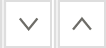
<style>
.page{position:relative;width:106px;height:48px;background:#ffffff}
.page>*{position:absolute;margin:0}
.t1{font:32px "DidactGothic";color:#6d6c67;scale:1.03 1}
.t2{font:32.5px "DidactGothic";color:#6d6c67}
</style>
<div class="page">
<p class="t1" style="left:19px;top:17px;width:20px;height:14px;rotate:90deg">&gt;</p>
<p class="t2" style="left:72px;top:16px;width:20px;height:15px;rotate:-90deg">&gt;</p>
</div>
